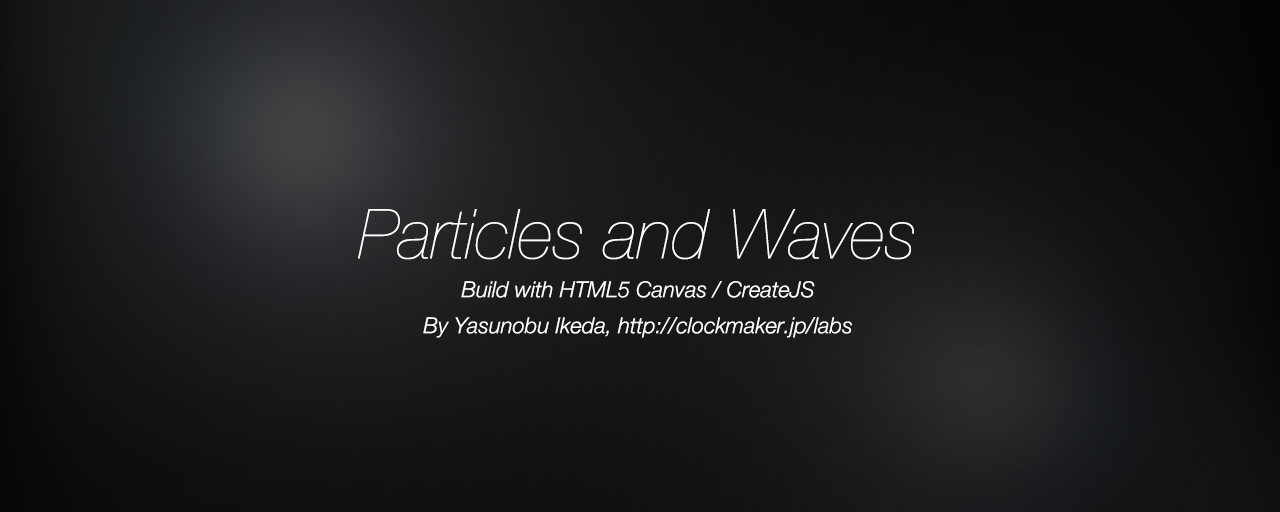
<style>
.page{position:relative;width:1280px;height:512px}
.page>*{position:absolute;margin:0}
.t1{font:22px/36px "HelveticaNeue-LightItalic";color:#ffffff}
.t2{font:69px/79px "HelveticaNeue-UltraLightItalic";color:#ffffff}
</style>
<div class="page">
<p class="t1" style="left:358px;top:209px;width:556px;height:129px;text-align:center"><span class="t2">Particles and Waves<br></span>Build with HTML5 Canvas / CreateJS<br>By Yasunobu Ikeda, http://clockmaker.jp/labs</p>
</div>
